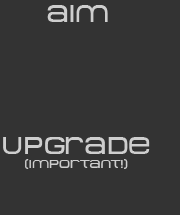
<style>
.page{position:relative;width:180px;height:215px;background:#333333}
.page>*{position:absolute;margin:0}
.t1{font:23.7px "MetroDF";color:#cecece}
.t2{font:12px "MetroDF";color:#cecece}
</style>
<div class="page">
<p class="t1" style="left:47px;top:5px;width:61px;height:17px">aim</p>
<p class="t2" style="left:3px;top:137px;width:147px;height:32px;text-align:center"><span class="t1">upgrade<br></span>(important!)</p>
</div>
